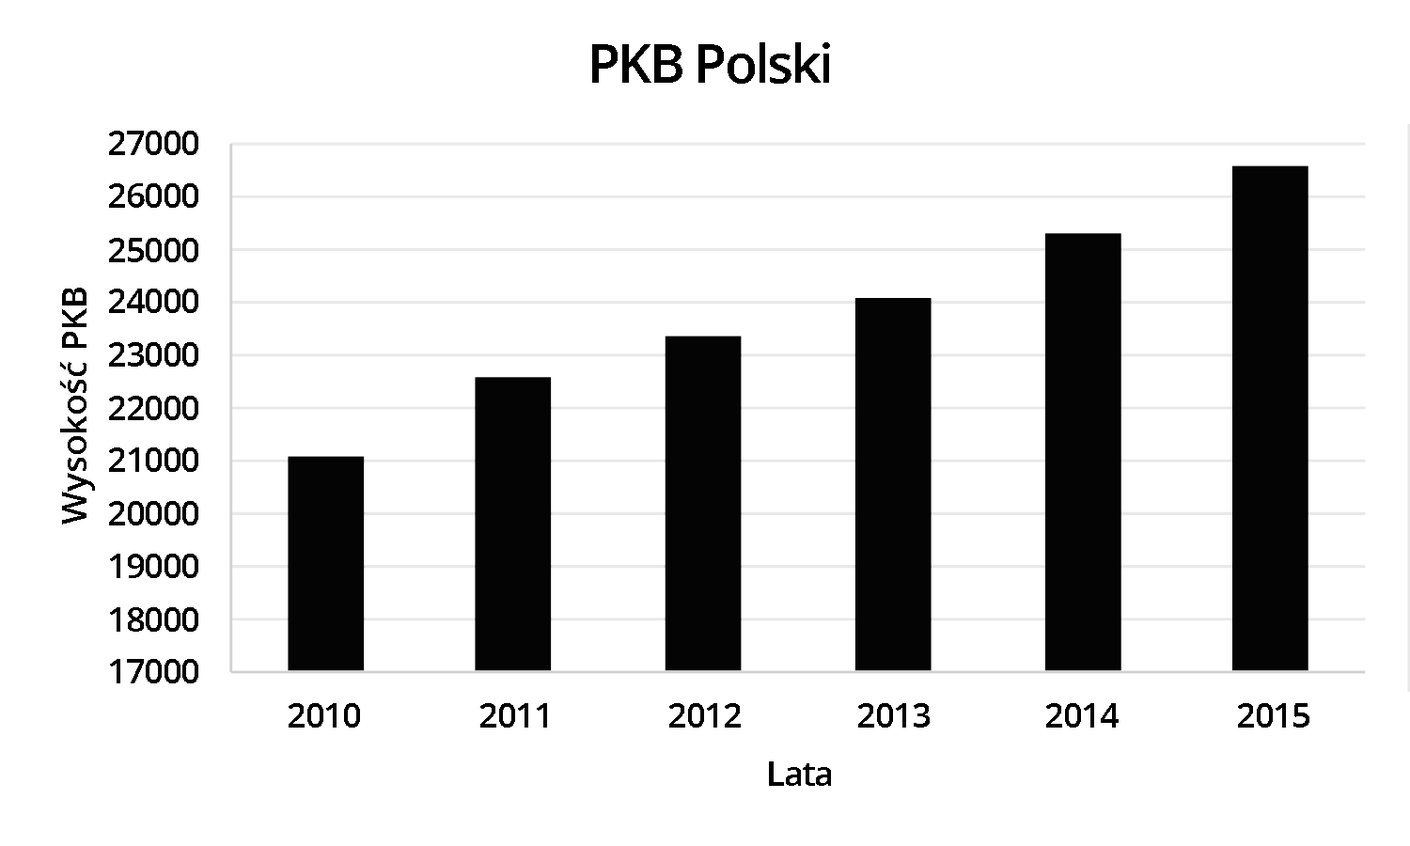
<style>
.page{position:relative;width:1410px;height:846px;background:#ffffff}
.page>*{position:absolute;margin:0}
.t1{font:54px "OpenSans-Semibold";letter-spacing:-0.05em;color:#000000}
.t2{font:35.1px "OpenSans-Semibold";letter-spacing:-0.05em;color:#000000}
.t3{font:35.1px "OpenSans-Semibold";letter-spacing:-0.01em;color:#000000}
</style>
<div class="page">
<p class="t1" style="left:592px;top:42px;width:238px;height:42px">PKB Polski</p>
<p class="t2" style="left:109px;top:131px;width:89px;height:24px">27000</p>
<p class="t2" style="left:109px;top:183px;width:89px;height:25px">26000</p>
<p class="t2" style="left:109px;top:238px;width:89px;height:24px">25000</p>
<p class="t3" style="left:60px;top:288px;width:35px;height:236px;rotate:-90deg">Wysokość PKB</p>
<p class="t2" style="left:109px;top:289px;width:89px;height:24px">24000</p>
<p class="t2" style="left:109px;top:342px;width:89px;height:25px">23000</p>
<p class="t2" style="left:109px;top:396px;width:89px;height:24px">22000</p>
<p class="t2" style="left:109px;top:447px;width:89px;height:25px">21000</p>
<p class="t2" style="left:109px;top:501px;width:89px;height:24px">20000</p>
<p class="t2" style="left:110px;top:554px;width:88px;height:24px">19000</p>
<p class="t2" style="left:110px;top:607px;width:88px;height:25px">18000</p>
<p class="t2" style="left:110px;top:659px;width:88px;height:24px">17000</p>
<p class="t2" style="left:289px;top:703px;width:71px;height:24px">2010</p>
<p class="t2" style="left:480px;top:703px;width:67px;height:24px">2011</p>
<p class="t2" style="left:669px;top:703px;width:72px;height:24px">2012</p>
<p class="t2" style="left:858px;top:703px;width:71px;height:24px">2013</p>
<p class="t2" style="left:1046px;top:703px;width:72px;height:24px">2014</p>
<p class="t2" style="left:1238px;top:703px;width:71px;height:24px">2015</p>
<p class="t2" style="left:769px;top:761px;width:62px;height:25px">Lata</p>
</div>
